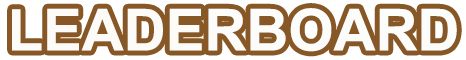
<style>
.page{position:relative;width:466px;height:60px;background:#875826}
.page>*{position:absolute;margin:0}
.t1{font:58px "Arial-BoldMT";color:#ffffff}
</style>
<div class="page">
<p class="t1" style="left:12px;top:8px;width:445px;height:44px">LEADERBOARD</p>
</div>
